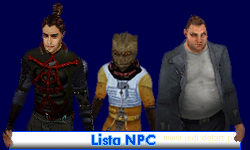
<style>
.page{position:relative;width:250px;height:150px;background:#000048}
.page>*{position:absolute;margin:0}
.t1{font:14px "FuturaBT-Heavy";color:#004be5}
.t2{font:9px "ArialMT";color:#fff0c6}
</style>
<div class="page">
<p class="t1" style="left:92px;top:134px;width:63px;height:11px">Lista NPC</p>
<p class="t2" style="left:164px;top:134px;width:70px;height:9px">www.jedi.delart.pl</p>
</div>
